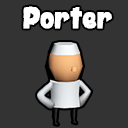
<style>
.page{position:relative;width:128px;height:128px;background:#333333}
.page>*{position:absolute;margin:0}
.t1{font:30px "SPIDERMONKEY";color:#ffffff;font-weight:bold}
</style>
<div class="page">
<p class="t1" style="left:23px;top:6px;width:89px;height:23px">Porter</p>
</div>
